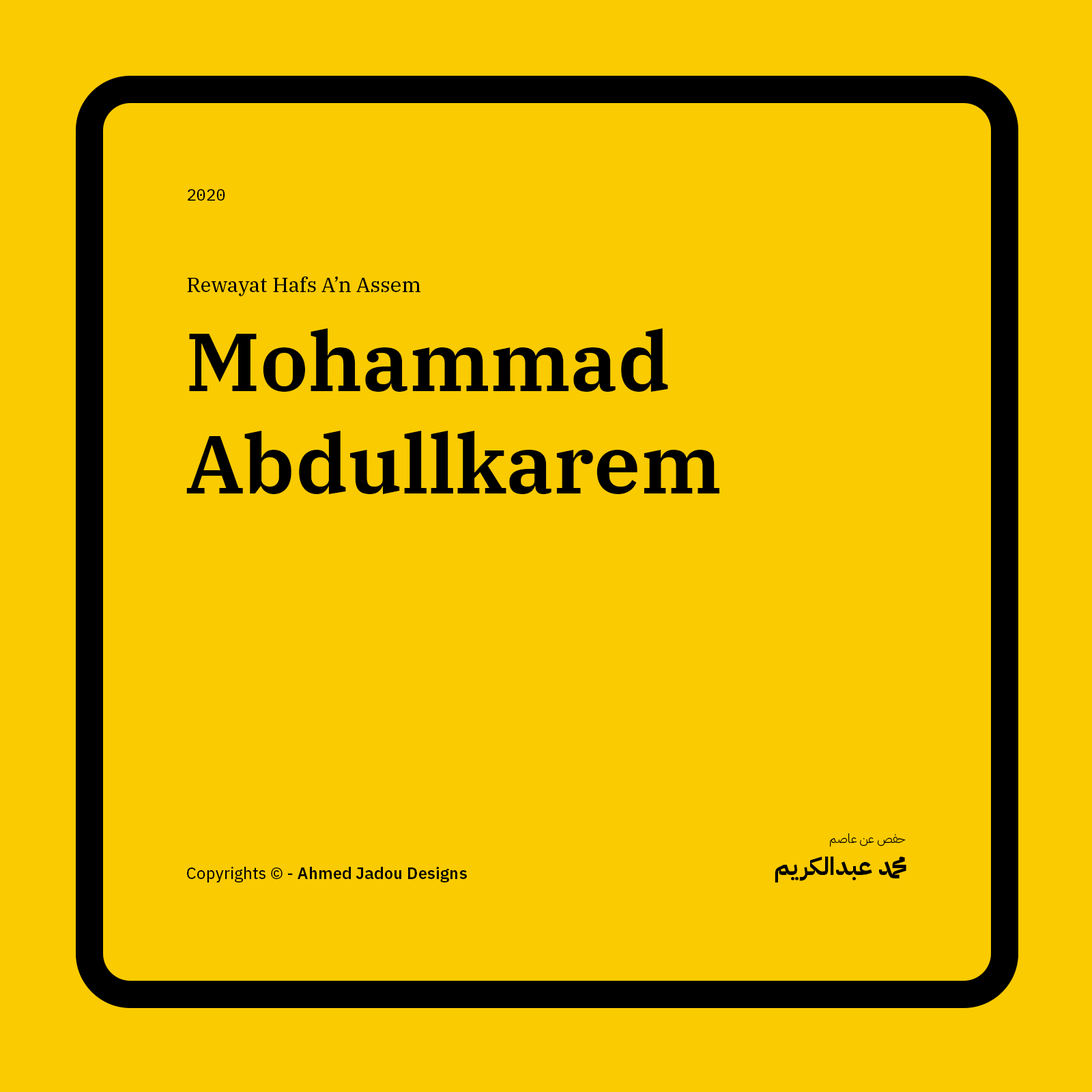
<style>
.page{position:relative;width:1092px;height:1092px;background:#facb00}
.page>*{position:absolute;margin:0}
.t1{font:16.4px "IBMPlexMono-Text";color:#000000}
.t2{font:20.5px "IBMPlexSerif-Text";color:#000000}
.t3{font:81.9px/102.7px "IBMPlexSerif-SemiBold";color:#000000}
.t4{font:12.3px "IBMPlexArabic-Light";color:#000000}
.t5{font:24.6px "IBMPlexArabic-Bold";color:#000000}
.t6{font:16.4px "IBMPlexSans-SemiBold";color:#000000}
.t7{font:16.4px "IBMPlexSans-Text";color:#000000}
</style>
<div class="page">
<p class="t1" style="left:188px;top:189px;width:37px;height:12px">2020</p>
<p class="t2" style="left:187px;top:276px;width:233px;height:20px">Rewayat Hafs A’n Assem</p>
<p class="t3" style="left:186px;top:328px;width:533px;height:166px">Mohammad Abdullkarem</p>
<p class="t4" style="left:830px;top:833px;width:76px;height:14px">حفص عن عاصم</p>
<p class="t5" style="left:775px;top:857px;width:131px;height:25px">محمد عبدالكريم</p>
<p class="t6" style="left:187px;top:867px;width:280px;height:15px"><span class="t7">Copyrights © - </span>Ahmed Jadou Designs</p>
</div>
